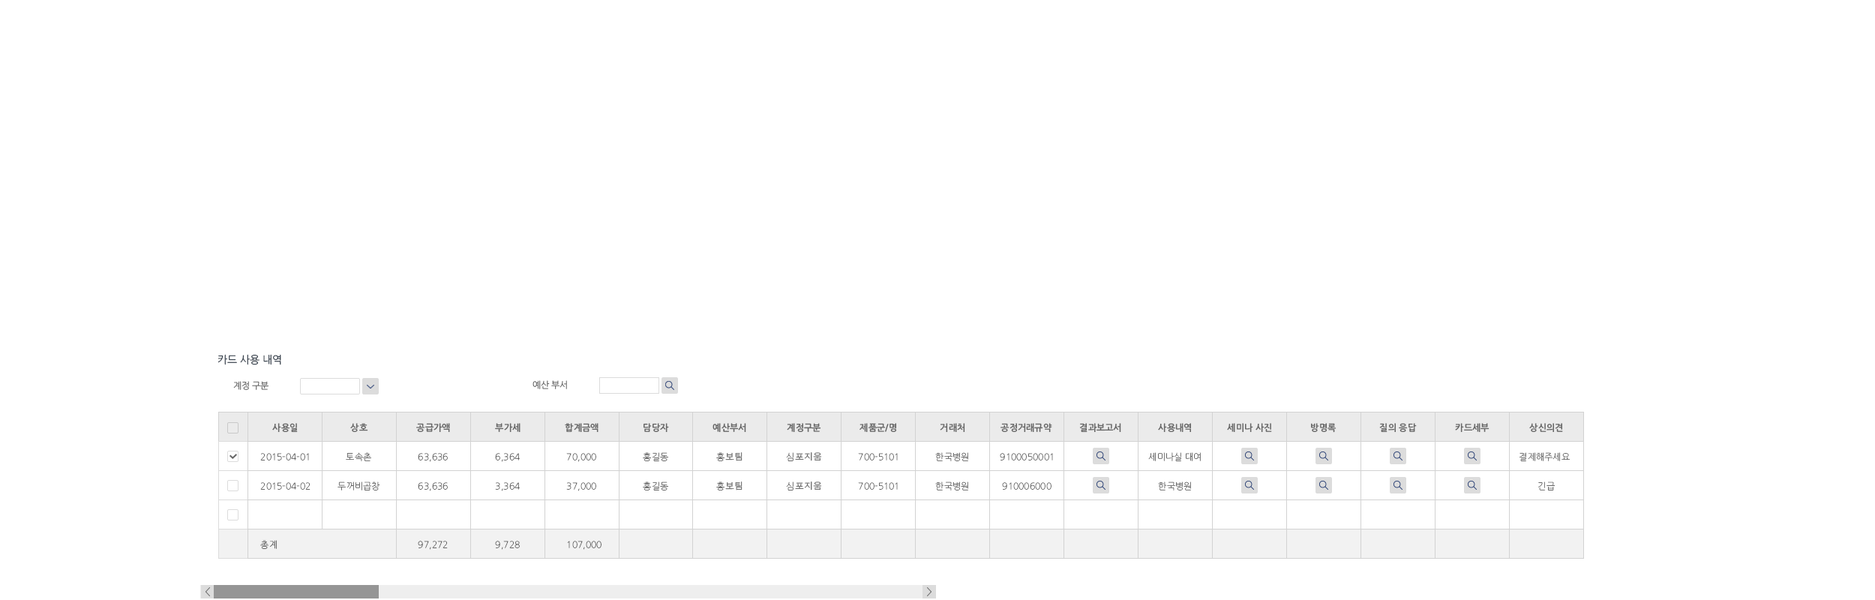
<style>
.page{position:relative;width:1875px;height:600px;background:#ffffff}
.page>*{position:absolute;margin:0}
.t1{font:10.5px "NanumGothicOTF";color:#38424e}
.t2{font:9px "NanumGothicOTF";letter-spacing:-0.025em;color:#666666}
.t3{font:9px "NanumGothicOTFBold";color:#666666}
.t4{font:9px "NanumGothicOTFLight";color:#666666}
.t5{font:9px "AppleGothic";color:#666666}
.t6{font:9px "NanumGothicOTFLight"}
</style>
<div class="page">
<p class="t1" style="left:218px;top:354px;width:63px;height:11px">카드 사용 내역</p>
<p class="t2" style="left:233px;top:381px;width:36px;height:9px">계정 구분</p>
<p class="t2" style="left:533px;top:380px;width:34px;height:9px">예산 부서</p>
<p class="t3" style="left:272px;top:423px;width:26px;height:9px">사용일</p>
<p class="t3" style="left:350px;top:423px;width:18px;height:9px">상호</p>
<p class="t3" style="left:416px;top:423px;width:34px;height:9px">공급가액</p>
<p class="t3" style="left:495px;top:423px;width:26px;height:9px">부가세</p>
<p class="t3" style="left:565px;top:423px;width:34px;height:9px">합계금액</p>
<p class="t3" style="left:644px;top:423px;width:25px;height:9px">담당자</p>
<p class="t3" style="left:713px;top:423px;width:33px;height:9px">예산부서</p>
<p class="t3" style="left:787px;top:423px;width:34px;height:9px">계정구분</p>
<p class="t3" style="left:860px;top:423px;width:37px;height:9px">제품군/명</p>
<p class="t3" style="left:940px;top:423px;width:25px;height:9px">거래처</p>
<p class="t3" style="left:1001px;top:423px;width:51px;height:9px">공정거래규약</p>
<p class="t3" style="left:1079px;top:423px;width:42px;height:9px">결과보고서</p>
<p class="t3" style="left:1158px;top:423px;width:33px;height:9px">사용내역</p>
<p class="t3" style="left:1227px;top:423px;width:45px;height:9px">세미나 사진</p>
<p class="t3" style="left:1311px;top:423px;width:26px;height:10px">방명록</p>
<p class="t3" style="left:1379px;top:423px;width:38px;height:9px">질의 응답</p>
<p class="t3" style="left:1455px;top:423px;width:35px;height:9px">카드세부</p>
<p class="t3" style="left:1529px;top:423px;width:34px;height:9px">상신의견</p>
<p class="t4" style="left:260px;top:453px;width:49px;height:8px">2015-04-01</p>
<p class="t4" style="left:260px;top:453px;width:49px;height:8px">2015-04-01</p>
<p class="t4" style="left:346px;top:452px;width:25px;height:9px">토속촌</p>
<p class="t4" style="left:346px;top:452px;width:25px;height:9px">토속촌</p>
<p class="t4" style="left:418px;top:453px;width:30px;height:9px">63,636</p>
<p class="t4" style="left:418px;top:453px;width:30px;height:9px">63,636</p>
<p class="t4" style="left:495px;top:453px;width:25px;height:9px">6,363</p>
<p class="t4" style="left:495px;top:453px;width:25px;height:9px">6,364</p>
<p class="t4" style="left:566px;top:453px;width:30px;height:9px">70,000</p>
<p class="t4" style="left:566px;top:453px;width:30px;height:9px">70,000</p>
<p class="t4" style="left:643px;top:452px;width:25px;height:9px">홍길동</p>
<p class="t5" style="left:716px;top:452px;width:27px;height:9px"><span class="t4">홍</span>보팀</p>
<p class="t5" style="left:786px;top:452px;width:36px;height:9px"><span class="t4">심</span>포지움</p>
<p class="t4" style="left:858px;top:453px;width:40px;height:8px">700-5101</p>
<p class="t4" style="left:935px;top:452px;width:33px;height:9px">한국병원</p>
<p class="t4" style="left:1000px;top:453px;width:53px;height:8px">9100050001</p>
<p class="t4" style="left:1148px;top:452px;width:53px;height:9px">세미나실 대여</p>
<p class="t4" style="left:1520px;top:452px;width:50px;height:9px">결제해주세요</p>
<p class="t4" style="left:260px;top:482px;width:49px;height:8px">2015-04-01</p>
<p class="t4" style="left:260px;top:482px;width:51px;height:8px">2015-04-02</p>
<p class="t4" style="left:338px;top:482px;width:42px;height:9px">두꺼비곱창</p>
<p class="t4" style="left:418px;top:482px;width:30px;height:9px">63,636</p>
<p class="t4" style="left:418px;top:482px;width:30px;height:9px">63,636</p>
<p class="t6" style="left:495px;top:482px;width:25px;height:9px">6,363</p>
<p class="t4" style="left:495px;top:482px;width:25px;height:9px">3,364</p>
<p class="t4" style="left:566px;top:482px;width:30px;height:9px">70,000</p>
<p class="t4" style="left:566px;top:482px;width:30px;height:9px">37,000</p>
<p class="t4" style="left:643px;top:482px;width:25px;height:9px">홍길동</p>
<p class="t5" style="left:716px;top:482px;width:27px;height:9px"><span class="t4">홍</span>보팀</p>
<p class="t5" style="left:786px;top:482px;width:36px;height:9px"><span class="t4">심</span>포지움</p>
<p class="t4" style="left:858px;top:482px;width:40px;height:8px">700-5101</p>
<p class="t4" style="left:935px;top:482px;width:33px;height:9px">한국병원</p>
<p class="t4" style="left:1002px;top:482px;width:50px;height:8px">910006000</p>
<p class="t4" style="left:1158px;top:482px;width:33px;height:9px">한국병원</p>
<p class="t4" style="left:1538px;top:482px;width:17px;height:9px">긴급</p>
<p class="t4" style="left:260px;top:540px;width:17px;height:9px">총계</p>
<p class="t4" style="left:418px;top:541px;width:30px;height:9px">97,272</p>
<p class="t4" style="left:495px;top:541px;width:25px;height:9px">9,728</p>
<p class="t4" style="left:567px;top:541px;width:35px;height:9px">107,000</p>
</div>
